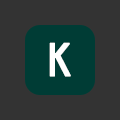
<style>
.page{position:relative;width:120px;height:120px;background:#333333}
.page>*{position:absolute;margin:0}
.t1{font:48px "Makinas";color:#ffffff;font-weight:bold}
</style>
<div class="page">
<p class="t1" style="left:49px;top:42px;width:22px;height:35px">K</p>
</div>
